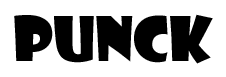
<style>
.page{position:relative;width:226px;height:77px;background:#ffffff}
.page>*{position:absolute;margin:0}
.t1{font:60px "ShowcardGothic-Reg";color:#000000}
</style>
<div class="page">
<p class="t1" style="left:14px;top:14px;width:199px;height:50px">PUNCK</p>
</div>
